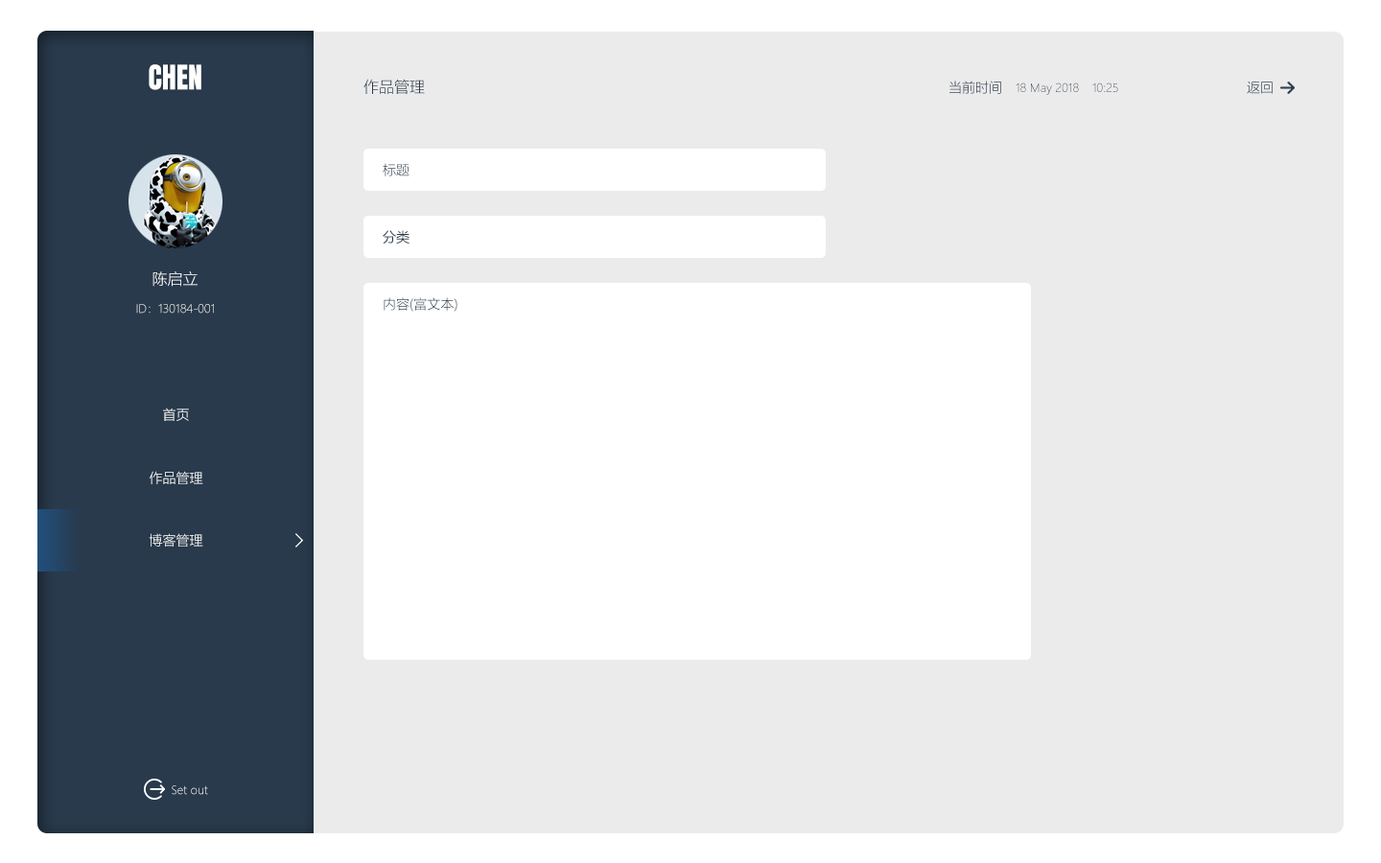
<style>
.page{position:relative;width:1381px;height:863px;background:#ebebeb}
.page>*{position:absolute;margin:0}
.t1{font:28.8px "Anton-Regular";color:#ffffff}
.t2{font:15.3px "MicrosoftYaHeiLight";color:#283a4c}
.t3{font:13.4px "MicrosoftYaHeiLight"}
.t4{font:11.5px "MicrosoftYaHeiLight";color:#283a4c}
.t5{font:11.5px "MicrosoftYaHeiLight"}
.t6{font:13.4px "MicrosoftYaHei";color:#283a4c}
.t7{font:15.3px "MicrosoftYaHeiLight";color:#ffffff}
.t8{font:13.4px "MicrosoftYaHeiLight";color:#ffffff}
</style>
<div class="page">
<p class="t1" style="left:149px;top:64px;width:52px;height:26px">CHEN</p>
<p class="t2" style="left:364px;top:79px;width:61px;height:15px">作品管理</p>
<p class="t3" style="left:950px;top:81px;width:51px;height:13px">当前时间</p>
<p class="t4" style="left:1016px;top:82px;width:63px;height:13px">18 May 2018</p>
<p class="t5" style="left:1093px;top:82px;width:25px;height:10px">10:25</p>
<p class="t3" style="left:1247px;top:81px;width:26px;height:13px">返回</p>
<p class="t3" style="left:383px;top:163px;width:27px;height:13px">标题</p>
<p class="t6" style="left:383px;top:230px;width:27px;height:14px">分类</p>
<p class="t7" style="left:153px;top:271px;width:45px;height:16px">陈启立</p>
<p class="t5" style="left:136px;top:304px;width:78px;height:10px">ID：130184-001</p>
<p class="t3" style="left:384px;top:297px;width:74px;height:15px">内容(富文本)</p>
<p class="t3" style="left:163px;top:408px;width:26px;height:13px">首页</p>
<p class="t8" style="left:150px;top:471px;width:53px;height:13px">作品管理</p>
<p class="t8" style="left:149px;top:533px;width:54px;height:14px">博客管理</p>
<p class="t5" style="left:172px;top:786px;width:36px;height:9px">Set out</p>
</div>
